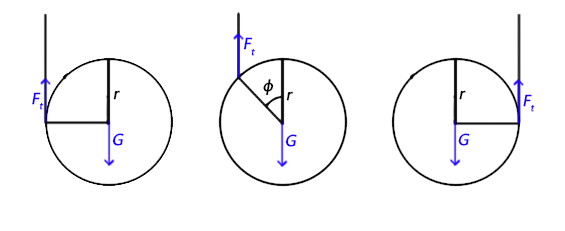
<style>
.page{position:relative;width:565px;height:231px;background:#ffffff}
.page>*{position:absolute;margin:0}
.t1{font:16px "SegoeUI";color:#1a00ff;font-weight:bold;font-style:italic}
.t2{font:16px "SegoeUI";color:#000000;font-weight:bold;font-style:italic}
</style>
<div class="page">
<p class="t1" style="left:243px;top:37px;width:12px;height:19px">Ft</p>
<p class="t2" style="left:263px;top:79px;width:11px;height:17px">ϕ</p>
<p class="t1" style="left:32px;top:92px;width:12px;height:18px">Ft</p>
<p class="t2" style="left:113px;top:90px;width:7px;height:10px">r</p>
<p class="t2" style="left:286px;top:91px;width:7px;height:10px">r</p>
<p class="t2" style="left:459px;top:90px;width:7px;height:10px">r</p>
<p class="t1" style="left:523px;top:94px;width:12px;height:18px">Ft</p>
<p class="t1" style="left:112px;top:133px;width:12px;height:13px">G</p>
<p class="t1" style="left:285px;top:134px;width:12px;height:13px">G</p>
<p class="t1" style="left:458px;top:133px;width:12px;height:13px">G</p>
</div>
